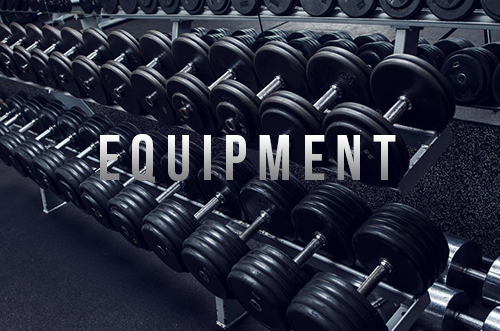
<style>
.page{position:relative;width:500px;height:331px}
.page>*{position:absolute;margin:0}
.t1{font:64px "BebasNeue"}
</style>
<div class="page">
<p class="t1" style="left:100px;top:134px;width:296px;height:49px">e q u i p m e n t</p>
</div>
